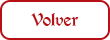
<style>
.page{position:relative;width:110px;height:40px;background:#ffffff}
.page>*{position:absolute;margin:0}
.t1{font:13px "BerryRotunda-Regular";color:#b70f16}
</style>
<div class="page">
<p class="t1" style="left:31px;top:13px;width:48px;height:13px">Volver</p>
</div>
